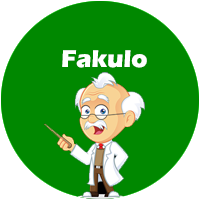
<style>
.page{position:relative;width:200px;height:200px;background:#008800}
.page>*{position:absolute;margin:0}
.t1{font:25px "ErasITC-Bold";color:#ffffff}
</style>
<div class="page">
<p class="t1" style="left:62px;top:50px;width:85px;height:18px">Fakulo</p>
</div>
